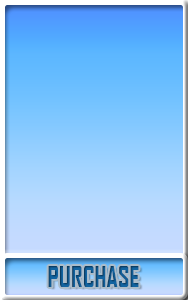
<style>
.page{position:relative;width:188px;height:300px}
.page>*{position:absolute;margin:0}
.t1{font:27px "AgencyFB-Bold";color:#10598f;scale:0.94 1}
</style>
<div class="page">
<p class="t1" style="left:48px;top:266px;width:91px;height:21px">PURCHASE</p>
</div>
